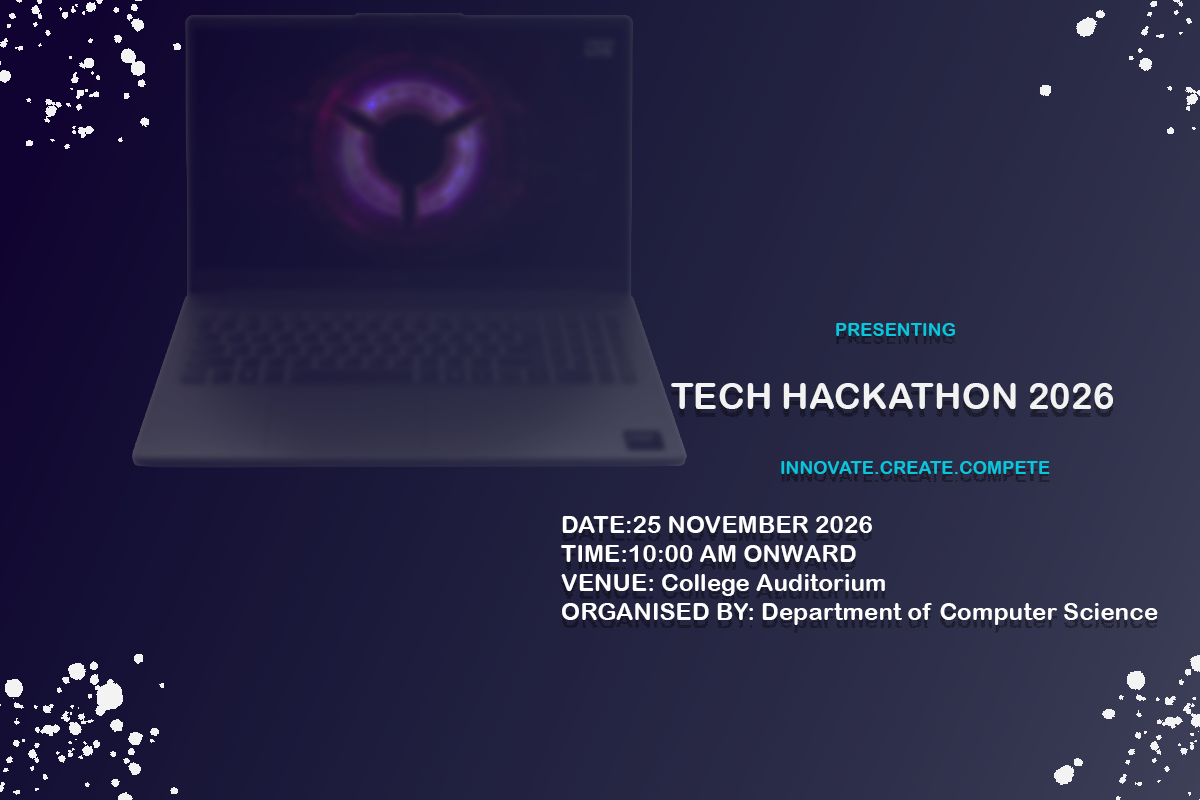
<style>
.page{position:relative;width:1200px;height:800px}
.page>*{position:absolute;margin:0}
.t1{font:24.3px "ArialRoundedMTBold";color:#ffffff}
.t2{font:50.6px "ArialRoundedMTBold";color:#f2f2f2}
.t3{font:18.2px "ArialRoundedMTBold";color:#07c7dd}
.t4{font:36.5px "ArialRoundedMTBold";color:#f2f2f2}
</style>
<div class="page">
<p class="t1" style="left:561px;top:323px;width:597px;height:302px"><span class="t2">                 </span><span class="t3">PRESENTING<br><br></span><span class="t4">   TECH HACKATHON 2026<br><br>     </span><span class="t3"> INNOVATE.CREATE.COMPETE<br><br></span>DATE:25 NOVEMBER 2026<br>TIME:10:00 AM ONWARD<br>VENUE: College Auditorium<br>ORGANISED BY: Department of Computer Science</p>
</div>
